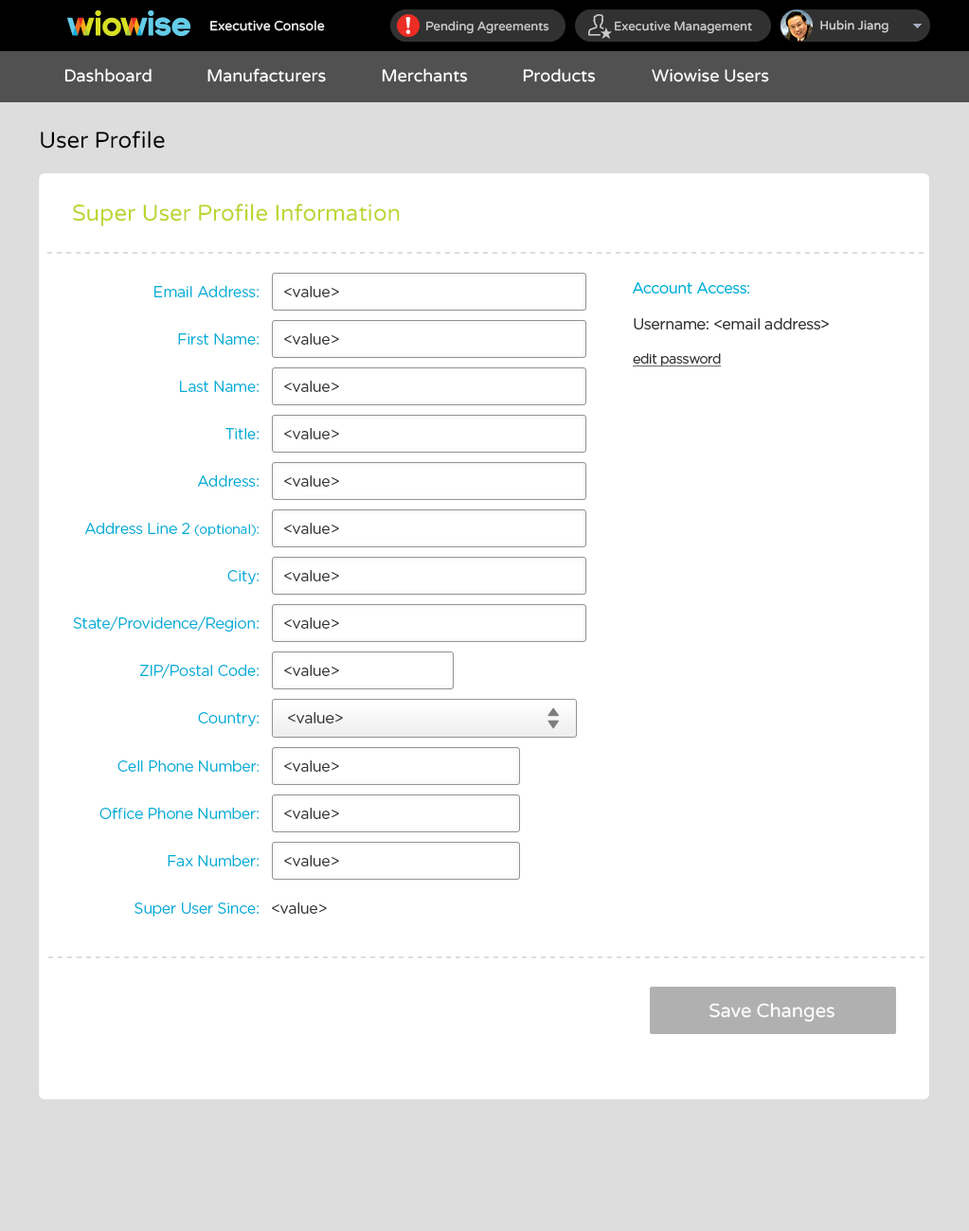
<style>
.page{position:relative;width:969px;height:1231px;background:#ffffff}
.page>*{position:absolute;margin:0}
.t1{font:13.3px "VarelaRound-Regular";color:#eeeeee}
.t2{font:12.3px "VarelaRound-Regular";color:#cccccc}
.t3{font:17px "VarelaRound-Regular";color:#ffffff}
.t4{font:22.7px "VarelaRound-Regular";color:#000000}
.t5{font:22.7px "VarelaRound-Regular";color:#bcd631}
.t6{font:15.2px "GothamRounded-Book";letter-spacing:-0.025em;color:#00afd8}
.t7{font:15.2px "GothamRounded-Book";letter-spacing:-0.025em;color:#333333}
.t8{font:13.3px "GothamRounded-Book";letter-spacing:-0.025em;color:#333333;text-decoration:underline}
.t9{font:13.3px "GothamRounded-Book";letter-spacing:-0.025em;color:#00afd8}
.t10{font:18.9px "VarelaRound-Regular";color:#ffffff}
</style>
<div class="page">
<p class="t1" style="left:210px;top:20px;width:115px;height:11px">Executive Console</p>
<p class="t2" style="left:426px;top:21px;width:123px;height:13px">Pending Agreements</p>
<p class="t2" style="left:615px;top:21px;width:137px;height:13px">Executive Management</p>
<p class="t2" style="left:820px;top:20px;width:68px;height:13px">Hubin Jiang</p>
<p class="t3" style="left:64px;top:68px;width:88px;height:14px">Dashboard</p>
<p class="t3" style="left:207px;top:68px;width:119px;height:14px">Manufacturers</p>
<p class="t3" style="left:382px;top:68px;width:86px;height:14px">Merchants</p>
<p class="t3" style="left:523px;top:68px;width:73px;height:14px">Products</p>
<p class="t3" style="left:651px;top:69px;width:118px;height:13px">Wiowise Users</p>
<p class="t4" style="left:41px;top:131px;width:124px;height:18px">User Profile</p>
<p class="t5" style="left:73px;top:204px;width:327px;height:22px">Super User Profile Information</p>
<p class="t6" style="left:154px;top:285px;width:105px;height:12px">Email Address:</p>
<p class="t7" style="left:284px;top:286px;width:55px;height:11px">&lt;value&gt;</p>
<p class="t6" style="left:633px;top:282px;width:116px;height:12px">Account Access:</p>
<p class="t7" style="left:633px;top:317px;width:196px;height:13px">Username: &lt;email address&gt;</p>
<p class="t6" style="left:178px;top:333px;width:81px;height:12px">First Name:</p>
<p class="t7" style="left:284px;top:333px;width:55px;height:12px">&lt;value&gt;</p>
<p class="t8" style="left:633px;top:353px;width:89px;height:14px">edit password</p>
<p class="t6" style="left:180px;top:381px;width:79px;height:11px">Last Name:</p>
<p class="t7" style="left:284px;top:381px;width:55px;height:11px">&lt;value&gt;</p>
<p class="t6" style="left:225px;top:428px;width:34px;height:11px">Title:</p>
<p class="t7" style="left:284px;top:428px;width:55px;height:11px">&lt;value&gt;</p>
<p class="t6" style="left:197px;top:474px;width:62px;height:13px">Address:</p>
<p class="t7" style="left:284px;top:475px;width:55px;height:12px">&lt;value&gt;</p>
<p class="t6" style="left:84px;top:522px;width:175px;height:15px">Address Line 2 <span class="t9">(optional):</span></p>
<p class="t7" style="left:284px;top:523px;width:55px;height:11px">&lt;value&gt;</p>
<p class="t6" style="left:227px;top:570px;width:32px;height:14px">City:</p>
<p class="t7" style="left:284px;top:570px;width:55px;height:11px">&lt;value&gt;</p>
<p class="t6" style="left:73px;top:616px;width:186px;height:16px">State/Providence/Region:</p>
<p class="t7" style="left:284px;top:617px;width:55px;height:12px">&lt;value&gt;</p>
<p class="t6" style="left:139px;top:664px;width:120px;height:15px">ZIP/Postal Code:</p>
<p class="t7" style="left:284px;top:665px;width:55px;height:11px">&lt;value&gt;</p>
<p class="t6" style="left:198px;top:712px;width:61px;height:14px">Country:</p>
<p class="t7" style="left:288px;top:712px;width:55px;height:11px">&lt;value&gt;</p>
<p class="t6" style="left:117px;top:759px;width:142px;height:13px">Cell Phone Number<span class="t9">:</span></p>
<p class="t7" style="left:284px;top:760px;width:55px;height:12px">&lt;value&gt;</p>
<p class="t6" style="left:99px;top:807px;width:160px;height:13px">Office Phone Number:</p>
<p class="t7" style="left:284px;top:808px;width:55px;height:11px">&lt;value&gt;</p>
<p class="t6" style="left:168px;top:854px;width:91px;height:12px">Fax Number:</p>
<p class="t7" style="left:284px;top:855px;width:55px;height:11px">&lt;value&gt;</p>
<p class="t6" style="left:134px;top:902px;width:125px;height:15px">Super User Since:</p>
<p class="t7" style="left:272px;top:902px;width:55px;height:12px">&lt;value&gt;</p>
<p class="t10" style="left:709px;top:1003px;width:125px;height:19px">Save Changes</p>
</div>
